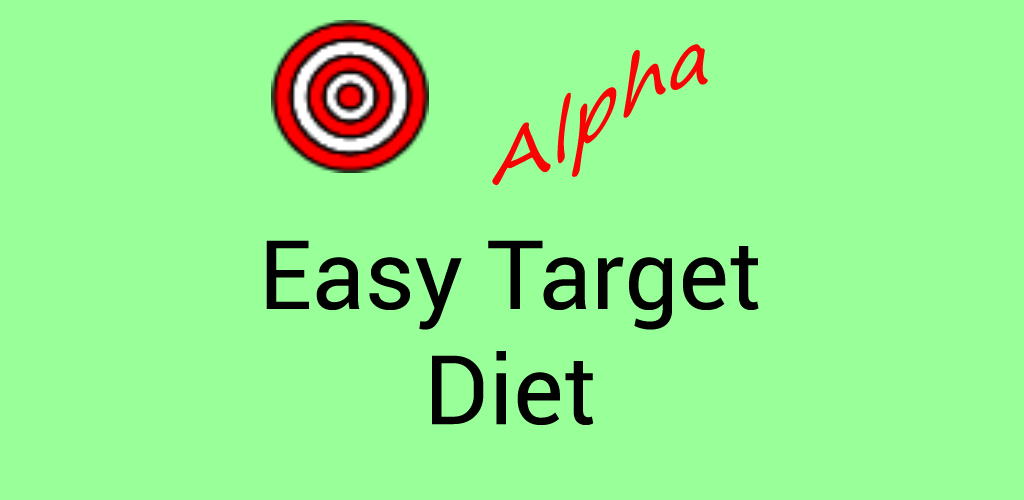
<style>
.page{position:relative;width:1024px;height:500px;background:#99ff99}
.page>*{position:absolute;margin:0}
.t1{font:75px "SegoePrint";color:#f90505}
.t2{font:95.8px "Roboto-Regular";color:#000000}
</style>
<div class="page">
<p class="t1" style="left:492px;top:44px;width:216px;height:142px;text-align:center">Alpha</p>
<p class="t2" style="left:266px;top:240px;width:493px;height:185px;text-align:center">Easy Target<br>Diet</p>
</div>
